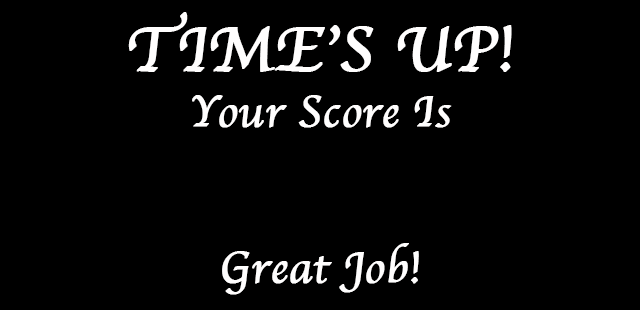
<style>
.page{position:relative;width:640px;height:310px;background:#000000}
.page>*{position:absolute;margin:0}
.t1{font:65px "Apple-Chancery";color:#fffefe;font-weight:bold}
.t2{font:45px "Apple-Chancery";color:#fffefe;font-weight:bold}
</style>
<div class="page">
<p class="t1" style="left:128px;top:12px;width:384px;height:60px">TIME’S UP!</p>
<p class="t2" style="left:192px;top:95px;width:260px;height:33px">Your Score Is</p>
<p class="t2" style="left:222px;top:243px;width:197px;height:52px">Great Job!</p>
</div>
